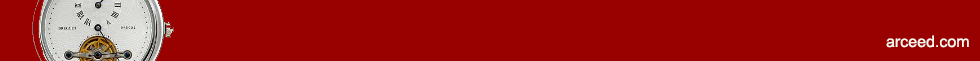
<style>
.page{position:relative;width:980px;height:61px;background:#990000}
.page>*{position:absolute;margin:0}
.t1{font:16px "DokChampa";color:#f8f8f1}
</style>
<div class="page">
<p class="t1" style="left:886px;top:35px;width:83px;height:13px">arceed.com</p>
</div>
